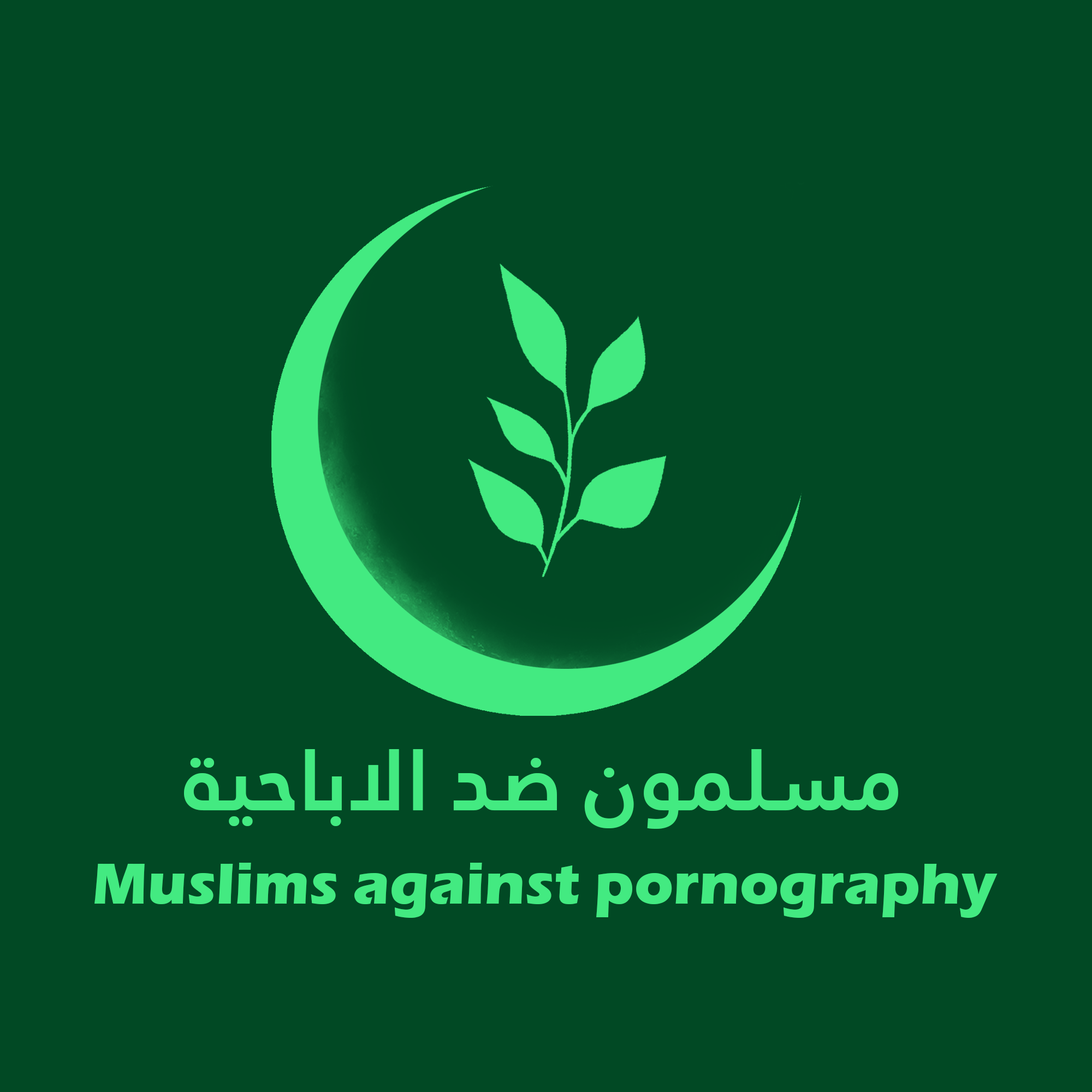
<style>
.page{position:relative;width:1092px;height:1092px;background:#014924}
.page>*{position:absolute;margin:0}
.t1{font:85.9px "JannaLT-Bold";color:#43ea81}
.t2{font:60.1px "ErasITC-Bold";color:#43ea81}
</style>
<div class="page">
<p class="t1" style="left:184px;top:749px;width:714px;height:80px">ﺔﻴﺣﺎﺑﻻﺍ ﺪﺿ ﻥﻮﻤﻠﺴﻣ</p>
<p class="t2" style="left:94px;top:863px;width:904px;height:55px">Muslims against pornography</p>
</div>
